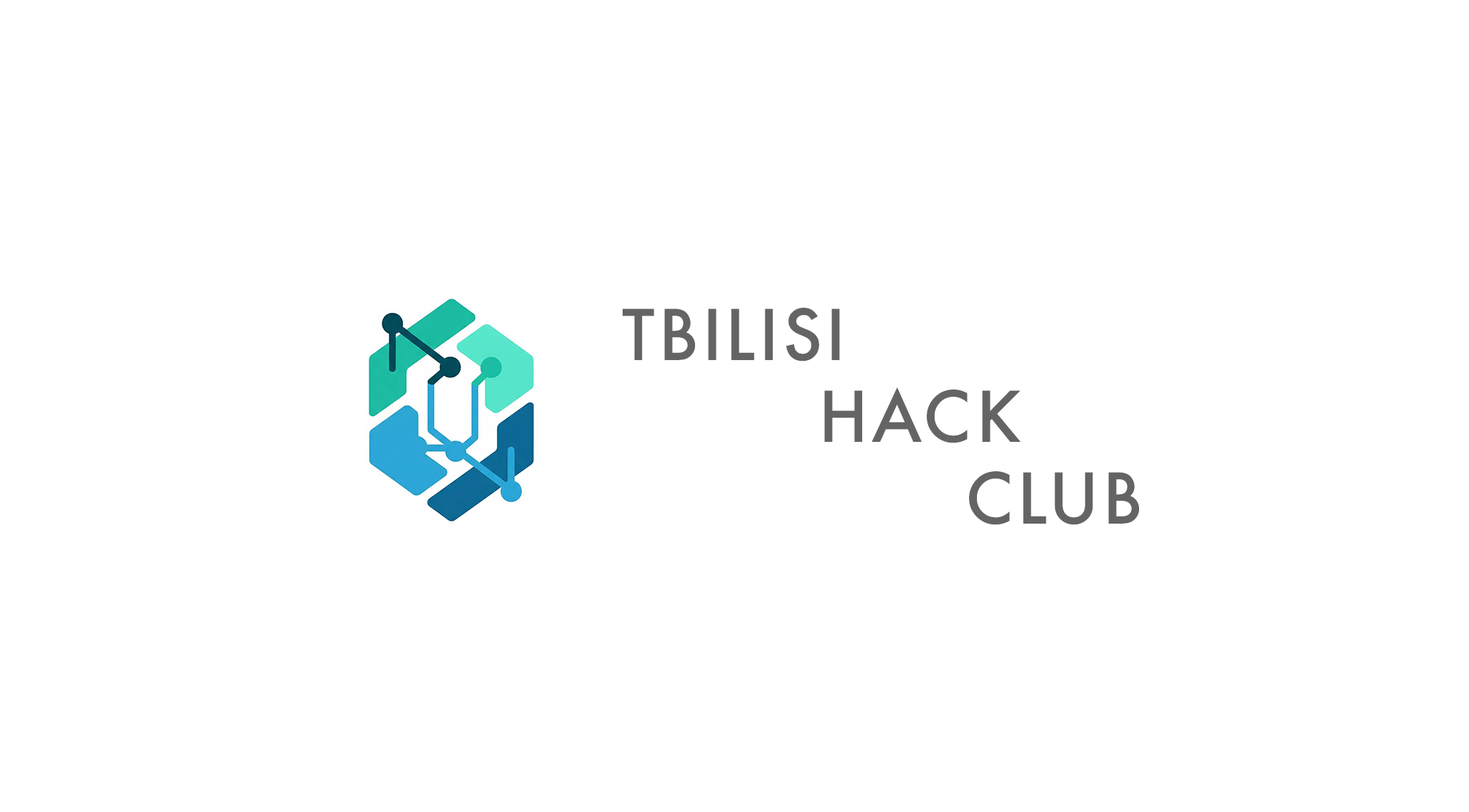
<style>
.page{position:relative;width:1469px;height:812px;background:#ffffff}
.page>*{position:absolute;margin:0}
.t1{font:68.2px "Futura-Medium";letter-spacing:0.05em;color:#646464}
</style>
<div class="page">
<p class="t1" style="left:623px;top:308px;width:516px;height:217px">TBILISI <br>    HACK <br>       CLUB</p>
</div>
